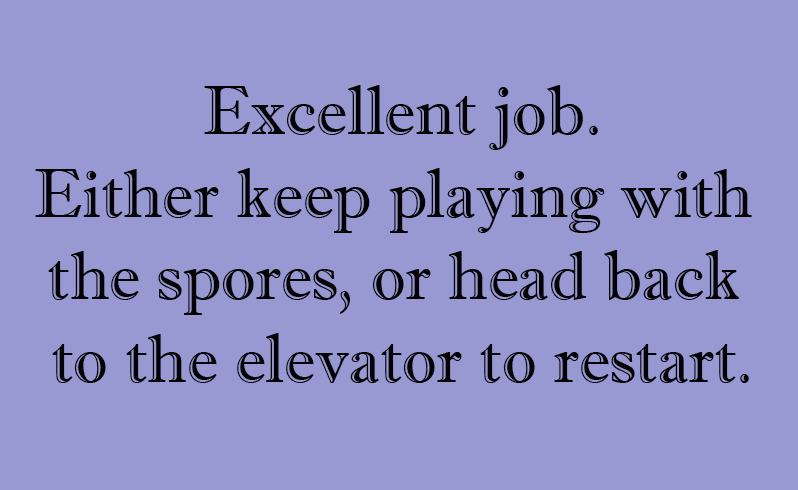
<style>
.page{position:relative;width:798px;height:490px;background:#9898d3}
.page>*{position:absolute;margin:0}
.t1{font:68.7px "ImprintMT-Shadow";color:#030303}
</style>
<div class="page">
<p class="t1" style="left:35px;top:85px;width:717px;height:298px;text-align:center">Excellent job.<br>Either keep playing with <br>the spores, or head back <br>to the elevator to restart.</p>
</div>
